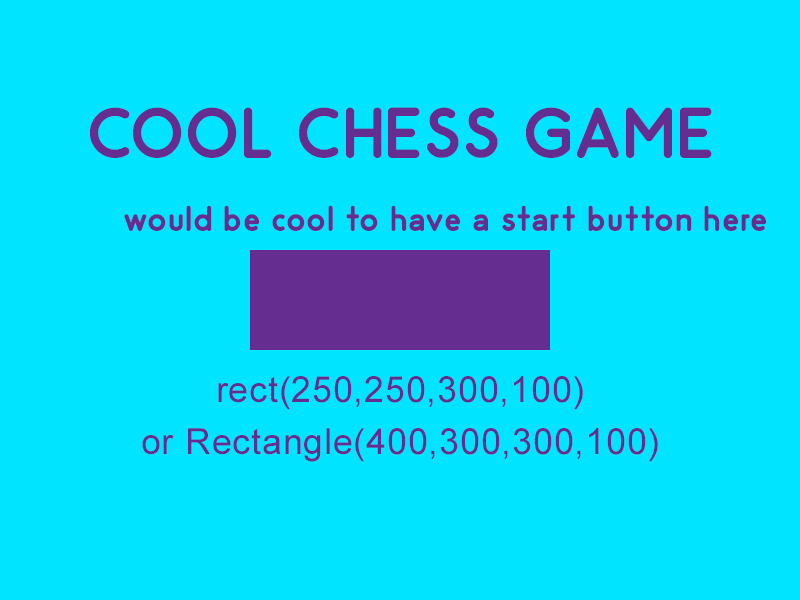
<style>
.page{position:relative;width:800px;height:600px;background:#00e4ff}
.page>*{position:absolute;margin:0}
.t1{font:72px "Odin-Bold";letter-spacing:0.02em;color:#662d91}
.t2{font:36px "Odin-Bold";letter-spacing:0.02em;color:#662d91}
.t3{font:36px "ArialMT";letter-spacing:0.02em;color:#662d91}
</style>
<div class="page">
<p class="t1" style="left:90px;top:107px;width:622px;height:51px">COOL CHESS GAME</p>
<p class="t2" style="left:124px;top:205px;width:643px;height:26px">would be cool to have a start button here</p>
<p class="t3" style="left:218px;top:376px;width:365px;height:34px">rect(250,250,300,100)</p>
<p class="t3" style="left:142px;top:428px;width:516px;height:34px">or Rectangle(400,300,300,100)</p>
</div>
